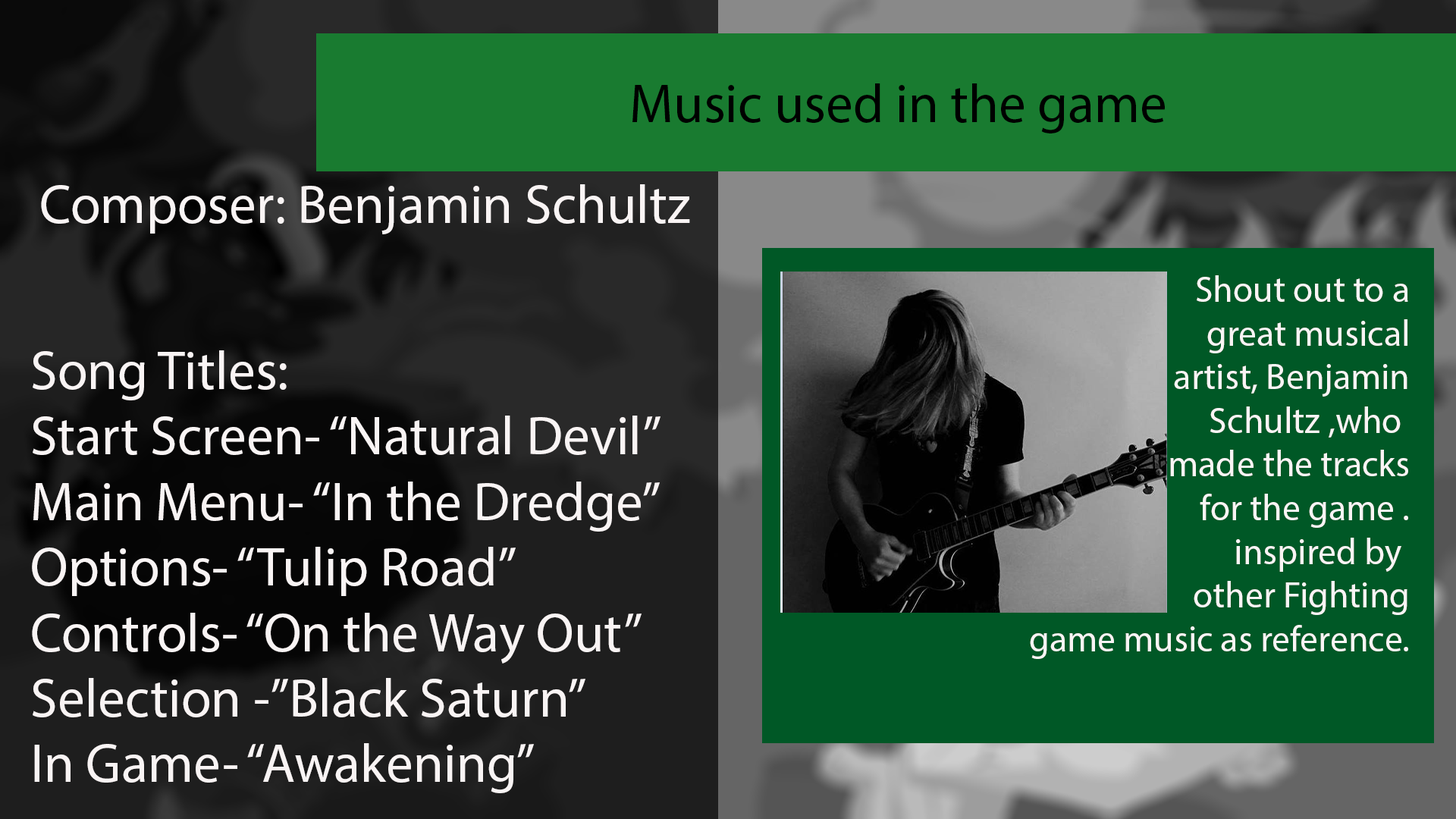
<style>
.page{position:relative;width:1456px;height:819px}
.page>*{position:absolute;margin:0}
.t1{font:54.6px "MyriadPro-Regular";color:#000000}
.t2{font:54.6px "MyriadPro-Regular";color:#f9f4f4}
.t3{font:36.4px "MyriadPro-Regular";color:#f9f4f4}
</style>
<div class="page">
<p class="t1" style="left:632px;top:83px;width:533px;height:50px">Music used in the game</p>
<p class="t2" style="left:41px;top:184px;width:649px;height:50px">Composer: Benjamin Schultz</p>
<p class="t3" style="left:1030px;top:275px;width:378px;height:384px;text-align:right">Shout out to a<br>great musical<br>artist, Benjamin<br>Schultz ,who <br>made the tracks<br>for the game .<br>inspired by <br>other Fighting<br>game music as reference.</p>
<p class="t2" style="left:32px;top:350px;width:628px;height:443px">Song Titles:<br>Start Screen- “Natural Devil”<br>Main Menu- “In the Dredge”<br>Options- “Tulip Road”<br>Controls- “On the Way Out”<br>Selection -”Black Saturn”<br>In Game- “Awakening”</p>
</div>
